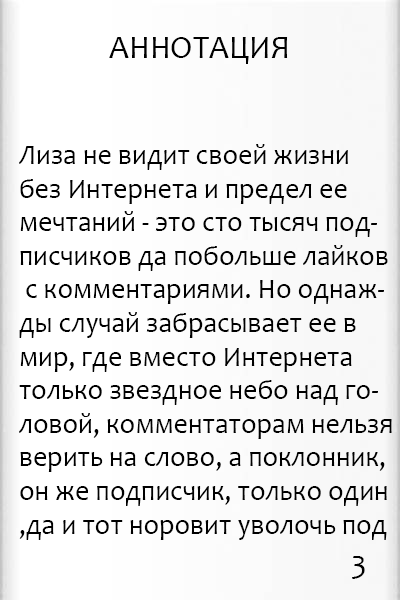
<style>
.page{position:relative;width:400px;height:600px;background:#ffffff}
.page>*{position:absolute;margin:0}
.t1{font:32px "Candara";color:#000000}
.t2{font:28px "Candara";color:#000000}
</style>
<div class="page">
<p class="t1" style="left:109px;top:37px;width:179px;height:27px">АННОТАЦИЯ</p>
<p class="t2" style="left:19px;top:144px;width:373px;height:396px">Лиза не видит своей жизни <br>без Интернета и предел ее <br>мечтаний - это сто тысяч под-<br>писчиков да побольше лайков<br> с комментариями. Но однаж-<br>ды случай забрасывает ее в <br>мир, где вместо Интернета <br>только звездное небо над го-<br>ловой, комментаторам нельзя<br>верить на слово, а поклонник, <br>он же подписчик, только один<br>,да и тот норовит уволочь под</p>
<p class="t1" style="left:352px;top:556px;width:13px;height:23px">3</p>
</div>
